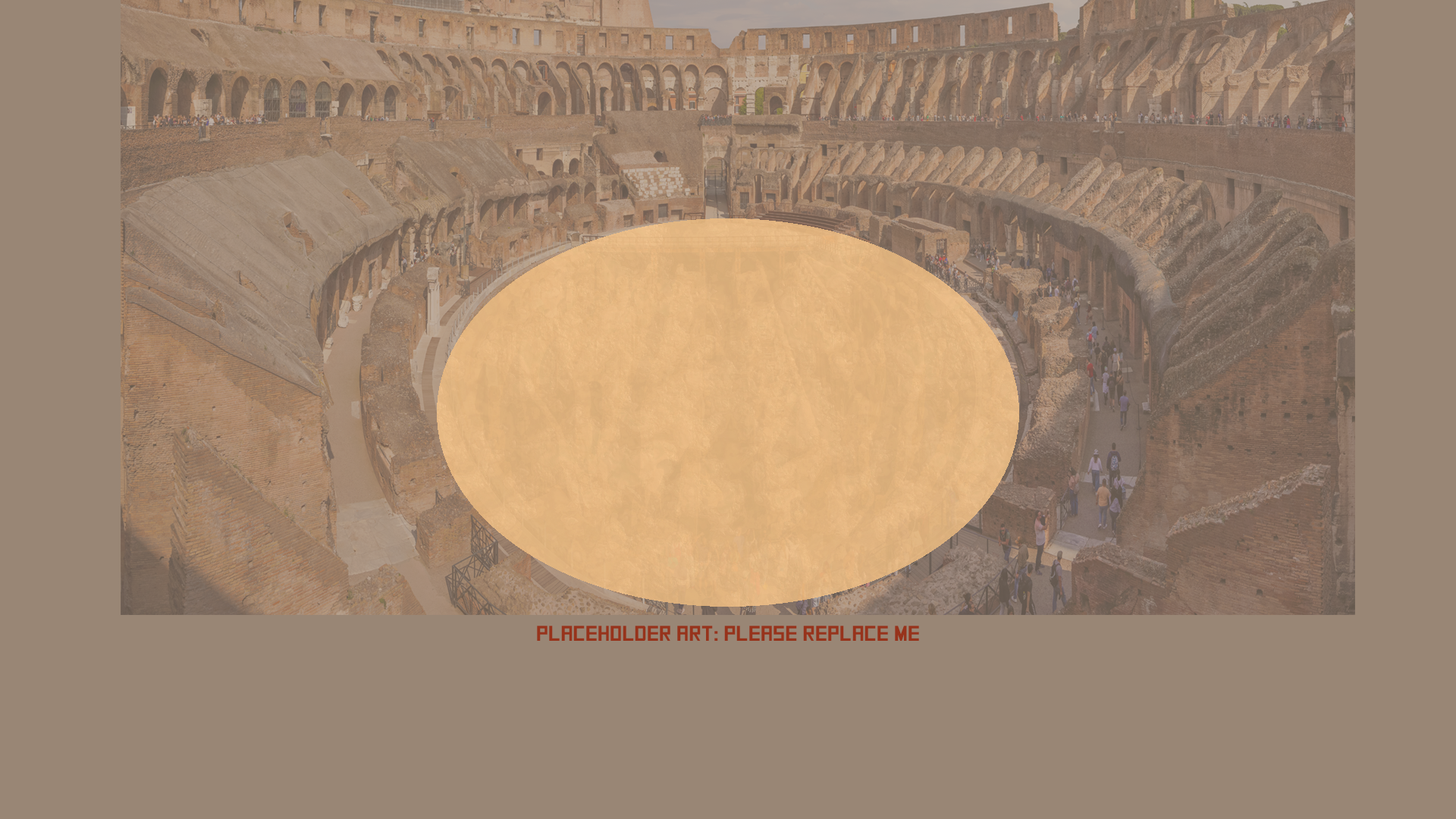
<style>
.page{position:relative;width:1456px;height:819px;background:#998675}
.page>*{position:absolute;margin:0}
.t1{font:21.2px "SquareFont";color:#97331b}
</style>
<div class="page">
<p class="t1" style="left:537px;top:626px;width:382px;height:15px">placeholder art: Please replace me</p>
</div>
